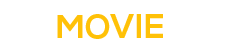
<style>
.page{position:relative;width:250px;height:50px;background:#ffffff}
.page>*{position:absolute;margin:0}
.t1{font:33.3px "NexaBold";color:#ffc107}
.t2{font:33.3px "NexaBold";color:#ffffff}
</style>
<div class="page">
<p class="t1" style="left:57px;top:14px;width:186px;height:25px">MOVIE<span class="t2">TIME</span></p>
</div>
